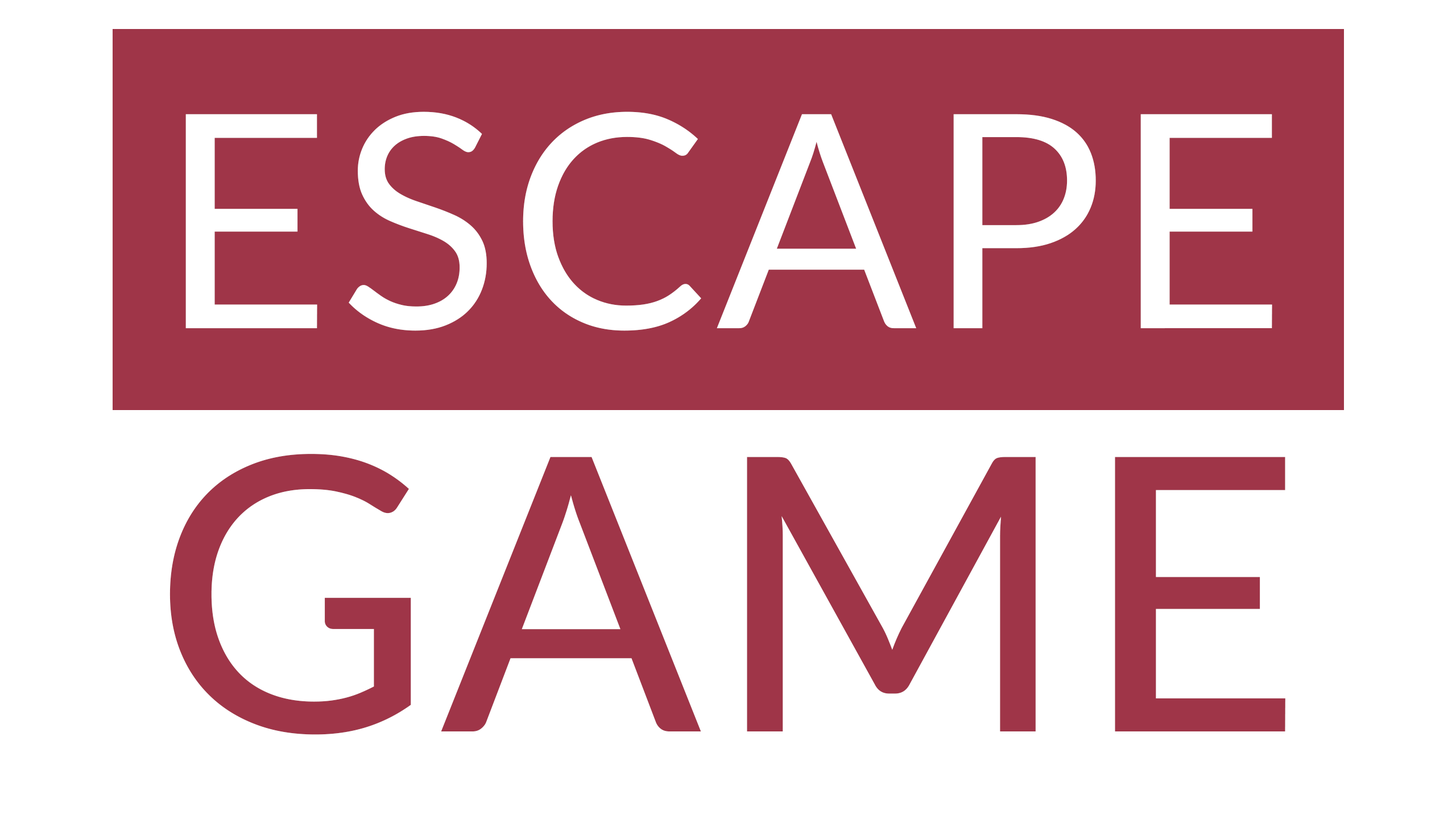
<style>
.page{position:relative;width:1456px;height:819px;background:#ffffff}
.page>*{position:absolute;margin:0}
.t1{font:298.6px "Lato-Regular";letter-spacing:0.03em;color:#f6f6f6}
.t2{font:382.3px "Lato-Medium";letter-spacing:0.03em;color:#9f3548}
</style>
<div class="page">
<p class="t1" style="left:185px;top:111px;width:1087px;height:220px">ESCAPE</p>
<p class="t2" style="left:169px;top:454px;width:1116px;height:281px">GAME</p>
</div>
